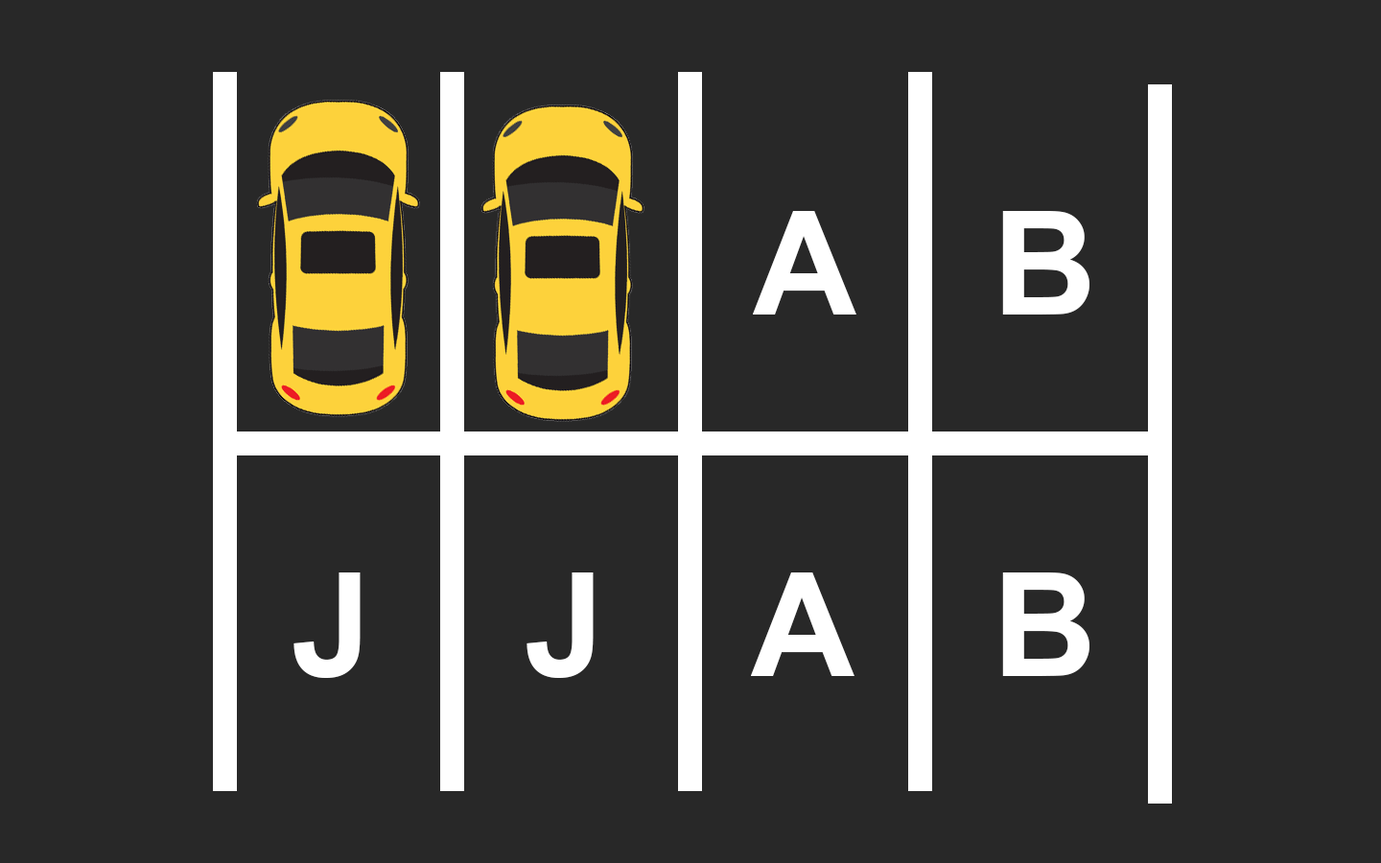
<style>
.page{position:relative;width:1381px;height:863px;background:#282828}
.page>*{position:absolute;margin:0}
.t1{font:143.9px "Arial-BoldMT";color:#ffffff}
</style>
<div class="page">
<p class="t1" style="left:753px;top:211px;width:104px;height:104px">A</p>
<p class="t1" style="left:1002px;top:211px;width:88px;height:104px">B</p>
<p class="t1" style="left:294px;top:573px;width:67px;height:105px">J</p>
<p class="t1" style="left:527px;top:573px;width:67px;height:105px">J</p>
<p class="t1" style="left:751px;top:573px;width:104px;height:103px">A</p>
<p class="t1" style="left:1002px;top:573px;width:88px;height:103px">B</p>
</div>
